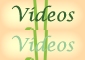
<style>
.page{position:relative;width:85px;height:60px}
.page>*{position:absolute;margin:0}
.t1{font:18px "LucidaCalligraphy-Italic";color:#336633}
.t2{font:18px "LucidaCalligraphy-Italic";color:#99cc99}
</style>
<div class="page">
<p class="t1" style="left:11px;top:5px;width:64px;height:17px">Videos</p>
<p class="t2" style="left:11px;top:35px;width:64px;height:17px">Videos</p>
</div>
